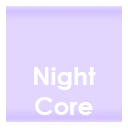
<style>
.page{position:relative;width:128px;height:128px;background:#e2d6ff}
.page>*{position:absolute;margin:0}
.t1{font:25px "CenturyGothic-Bold";color:#ffffff}
</style>
<div class="page">
<p class="t1" style="left:34px;top:67px;width:62px;height:48px;text-align:center">Night<br>Core</p>
</div>
